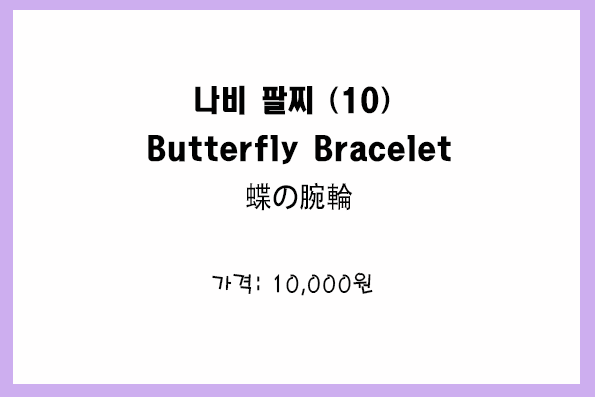
<style>
.page{position:relative;width:595px;height:397px;background:#fffefe}
.page>*{position:absolute;margin:0}
.t1{font:30px/48px "HeadlineR-HM";color:#010101;scale:0.9 1}
.t2{font:30px/48px "AdobeHeitiStd-Regular";color:#010101;scale:0.9 1}
.t3{font:24px "H2porM";color:#040404;scale:0.9 1}
</style>
<div class="page">
<p class="t1" style="left:148px;top:85px;width:303px;height:126px;text-align:center">나비 팔찌 (10) <br>Butterfly Bracelet<br><span class="t2">蝶の腕輪</span></p>
<p class="t3" style="left:212px;top:272px;width:161px;height:24px">가격: 10,000원</p>
</div>
